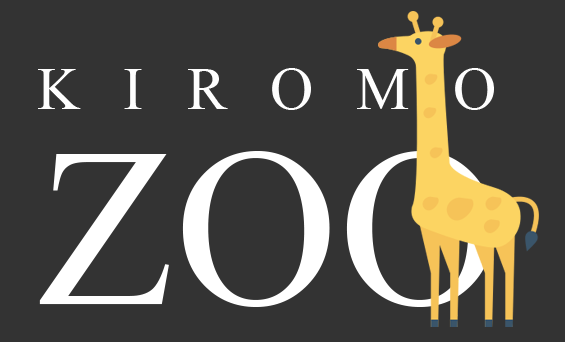
<style>
.page{position:relative;width:565px;height:342px;background:#333333}
.page>*{position:absolute;margin:0}
.t1{font:60px "TimesNewRomanPSMT";letter-spacing:0.72em;color:#fefefe}
.t2{font:226px "TimesNewRomanPSMT";color:#ffffff}
</style>
<div class="page">
<p class="t1" style="left:38px;top:68px;width:456px;height:42px">KIROMO</p>
<p class="t2" style="left:39px;top:151px;width:455px;height:156px">ZOO</p>
</div>
